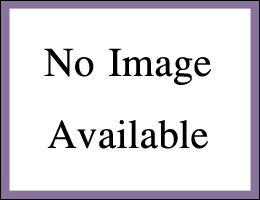
<style>
.page{position:relative;width:260px;height:200px;background:#ffffff}
.page>*{position:absolute;margin:0}
.t1{font:60px "EucrosiaUPC";letter-spacing:0.005em;color:#000000}
</style>
<div class="page">
<p class="t1" style="left:44px;top:48px;width:167px;height:101px;text-align:center">No Image<br>Available</p>
</div>
